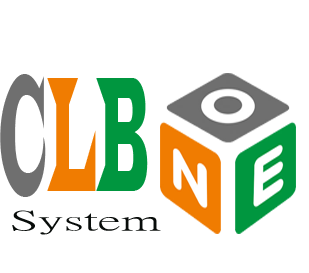
<style>
.page{position:relative;width:309px;height:273px;background:#ffffff}
.page>*{position:absolute;margin:0}
.t1{font:170px "LatinWide";color:#6f6f6f;scale:0.22 1}
.t2{font:170px "LatinWide";color:#f07c01;scale:0.22 1}
.t3{font:170px "LatinWide";color:#00963f;scale:0.22 1}
.t4{font:27.3px "PMingLiU-ExtB";color:#080c0a;scale:1.99 1}
</style>
<div class="page">
<p class="t1" style="left:0px;top:74px;width:148px;height:123px">C<span class="t2">L</span><span class="t3">B</span></p>
<p class="t4" style="left:12px;top:210px;width:149px;height:25px">System</p>
</div>
